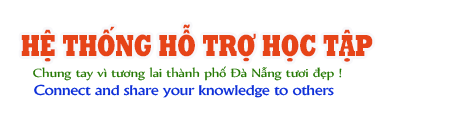
<style>
.page{position:relative;width:452px;height:117px;background:#ffffff}
.page>*{position:absolute;margin:0}
.t1{font:31px "UTM-Rockwell";letter-spacing:-0.025em;color:#e64418;scale:0.71 1}
.t2{font:14.3px "UTM-Nyala";letter-spacing:-0.025em;color:#277a06;scale:1.17 1}
.t3{font:14.6px "UTM-Khuccamta";letter-spacing:-0.025em;color:#0f31d9;scale:1.26 1}
</style>
<div class="page">
<p class="t1" style="left:21px;top:24px;width:352px;height:38px">HỆ THỐNG HỖ TRỢ HỌC TẬP</p>
<p class="t2" style="left:33px;top:66px;width:309px;height:15px">Chung tay vì tương lai thành phố Đà Nẵng tươi đẹp !</p>
<p class="t3" style="left:34px;top:84px;width:300px;height:14px">Connect and share your knowledge to others</p>
</div>
